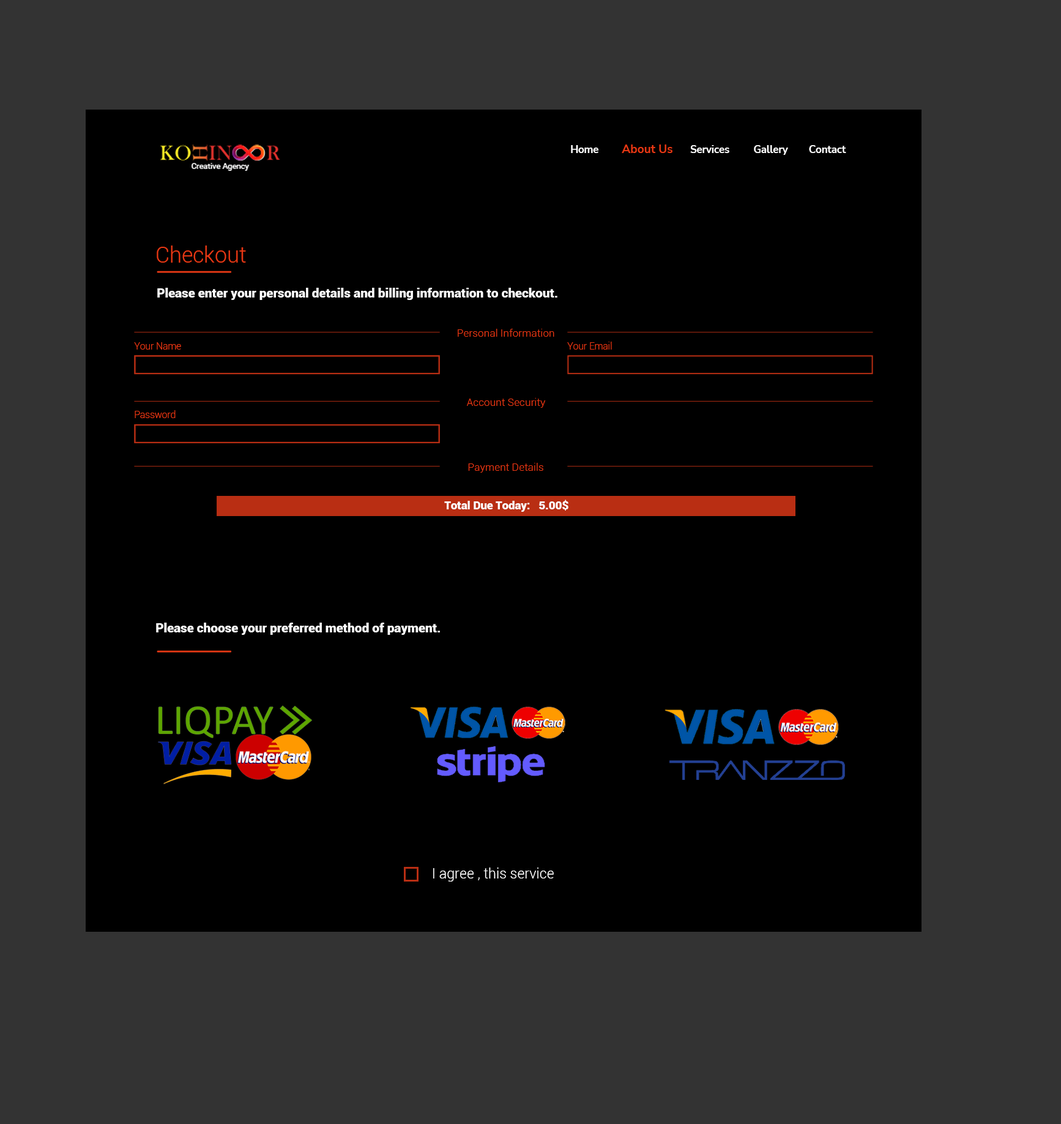
<style>
.page{position:relative;width:1061px;height:1124px;background:#000000}
.page>*{position:absolute;margin:0}
.t1{font:10.2px "NunitoSans-Bold";color:#ffffff}
.t2{font:11.6px "NunitoSans-Bold";color:#e53814}
.t3{font:21.8px "Roboto-Light";color:#e53814}
.t4{font:12.8px "Roboto-Black";color:#ffffff}
.t5{font:10.6px "Roboto-Light";color:#e53814}
.t6{font:9.5px "Roboto-Light";color:#e53814}
.t7{font:11.4px "Roboto-Black";color:#feffff}
.t8{font:14.2px "Roboto-Light";color:#ffffff}
</style>
<div class="page">
<p class="t1" style="left:571px;top:145px;width:28px;height:8px">Home</p>
<p class="t2" style="left:622px;top:144px;width:51px;height:9px">About Us</p>
<p class="t1" style="left:690px;top:145px;width:40px;height:8px">Services</p>
<p class="t1" style="left:754px;top:145px;width:34px;height:10px">Gallery</p>
<p class="t1" style="left:809px;top:145px;width:37px;height:8px">Contact</p>
<p class="t3" style="left:157px;top:245px;width:89px;height:18px">Checkout</p>
<p class="t4" style="left:157px;top:288px;width:401px;height:12px">Please enter your personal details and billing information to checkout.</p>
<p class="t5" style="left:458px;top:329px;width:96px;height:8px">Personal Information</p>
<p class="t6" style="left:567px;top:341px;width:45px;height:8px">Your Email</p>
<p class="t6" style="left:134px;top:342px;width:47px;height:7px">Your Name</p>
<p class="t5" style="left:467px;top:398px;width:79px;height:10px">Account Security</p>
<p class="t6" style="left:135px;top:410px;width:41px;height:8px">Password</p>
<p class="t5" style="left:468px;top:463px;width:75px;height:9px">Payment Details</p>
<p class="t7" style="left:444px;top:499px;width:125px;height:13px">Total Due Today:   5.00$</p>
<p class="t4" style="left:156px;top:622px;width:284px;height:13px">Please choose your preferred method of payment.</p>
<p class="t8" style="left:433px;top:867px;width:121px;height:14px">I agree , this service</p>
</div>
